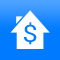
<style>
.page{position:relative;width:60px;height:60px;background:#007aff}
.page>*{position:absolute;margin:0}
.t1{font:23.5px "Roboto-Regular";color:#007aff;scale:1.15 1}
</style>
<div class="page">
<p class="t1" style="left:24px;top:22px;width:13px;height:23px">$</p>
</div>
